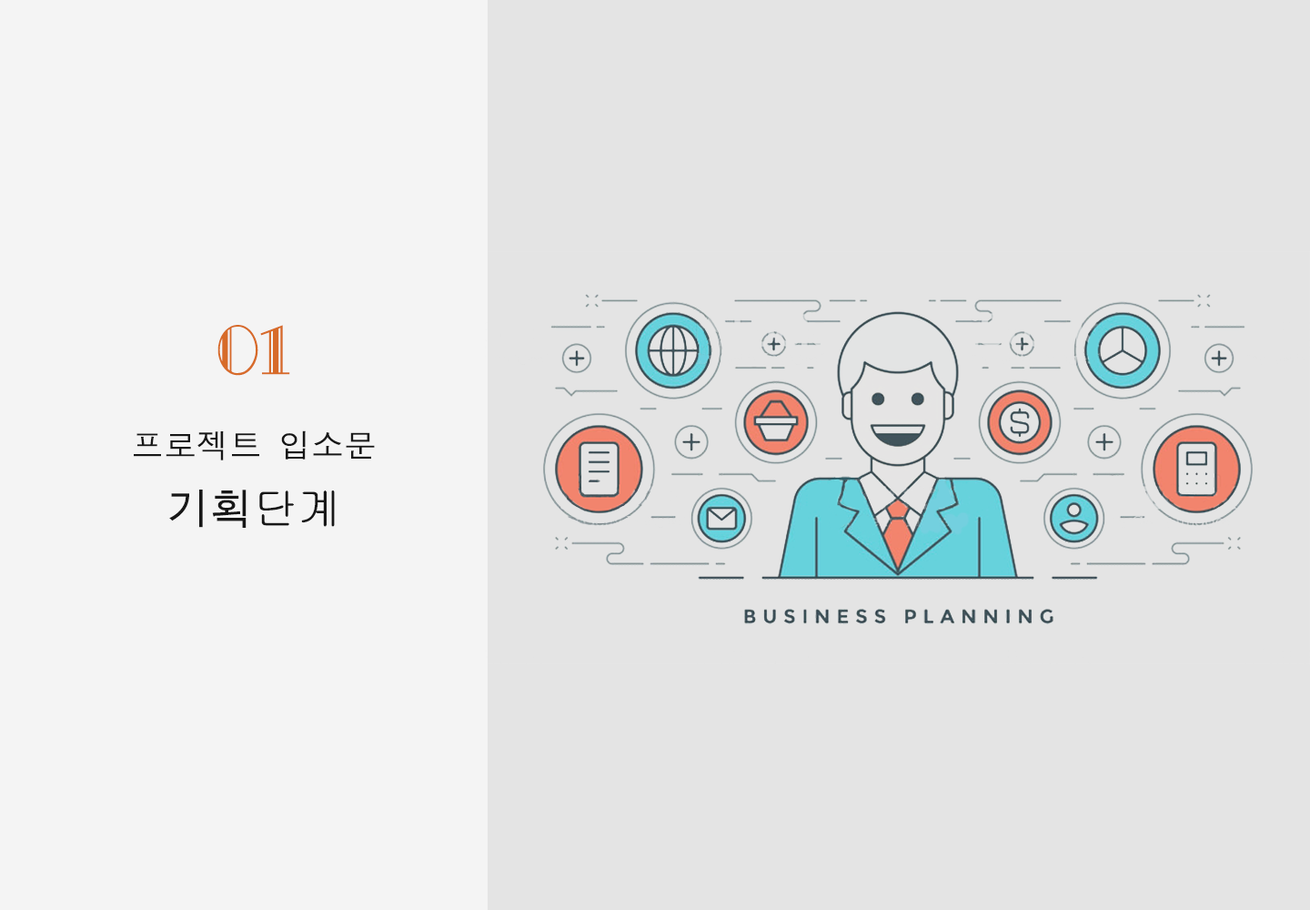
<style>
.page{position:relative;width:1310px;height:910px;background:#e4e4e4}
.page>*{position:absolute;margin:0}
.t1{font:32.8px "DotumChe";color:#171717}
.t2{font:65.5px "Yj-SHANALL-Medium";color:#d76b29}
.t3{font:43.7px "MDotum";color:#171717}
.t4{font:43.7px "Gulim";color:#171717}
</style>
<div class="page">
<p class="t1" style="left:134px;top:325px;width:241px;height:203px;text-align:center"><span class="t2">01<br></span>프로젝트 입소문<br><span class="t3">기획</span><span class="t4">단계</span></p>
</div>
